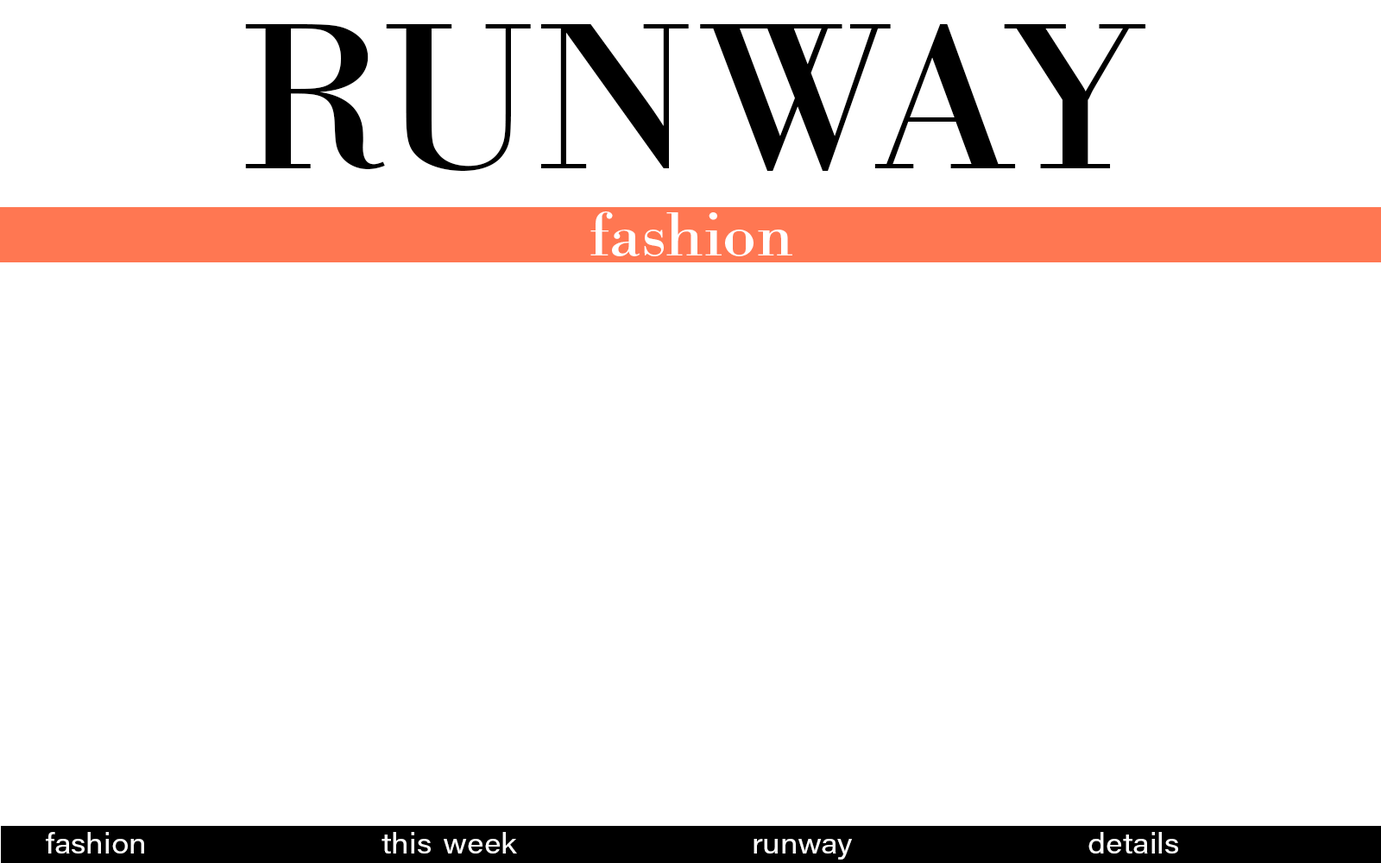
<style>
.page{position:relative;width:1381px;height:863px;background:#ffffff}
.page>*{position:absolute;margin:0}
.t1{font:215.8px "BodoniURW-Reg";color:#000000;scale:1.1 1}
.t2{font:64.7px "BodoniURW-Reg";color:#ffffff;scale:1.1 1}
.t3{font:28.8px "AcuminPro-Regular";color:#ffffff;scale:1.1 1}
.t4{font:28.8px "AcuminPro-Regular";color:#000000;scale:1.1 1}
</style>
<div class="page">
<p class="t1" style="left:245px;top:24px;width:901px;height:147px">RUNWAY</p>
<p class="t2" style="left:590px;top:212px;width:203px;height:44px">fashion</p>
<p class="t3" style="left:46px;top:832px;width:1132px;height:28px">fashion this<span class="t4">-</span>week runway details</p>
</div>
